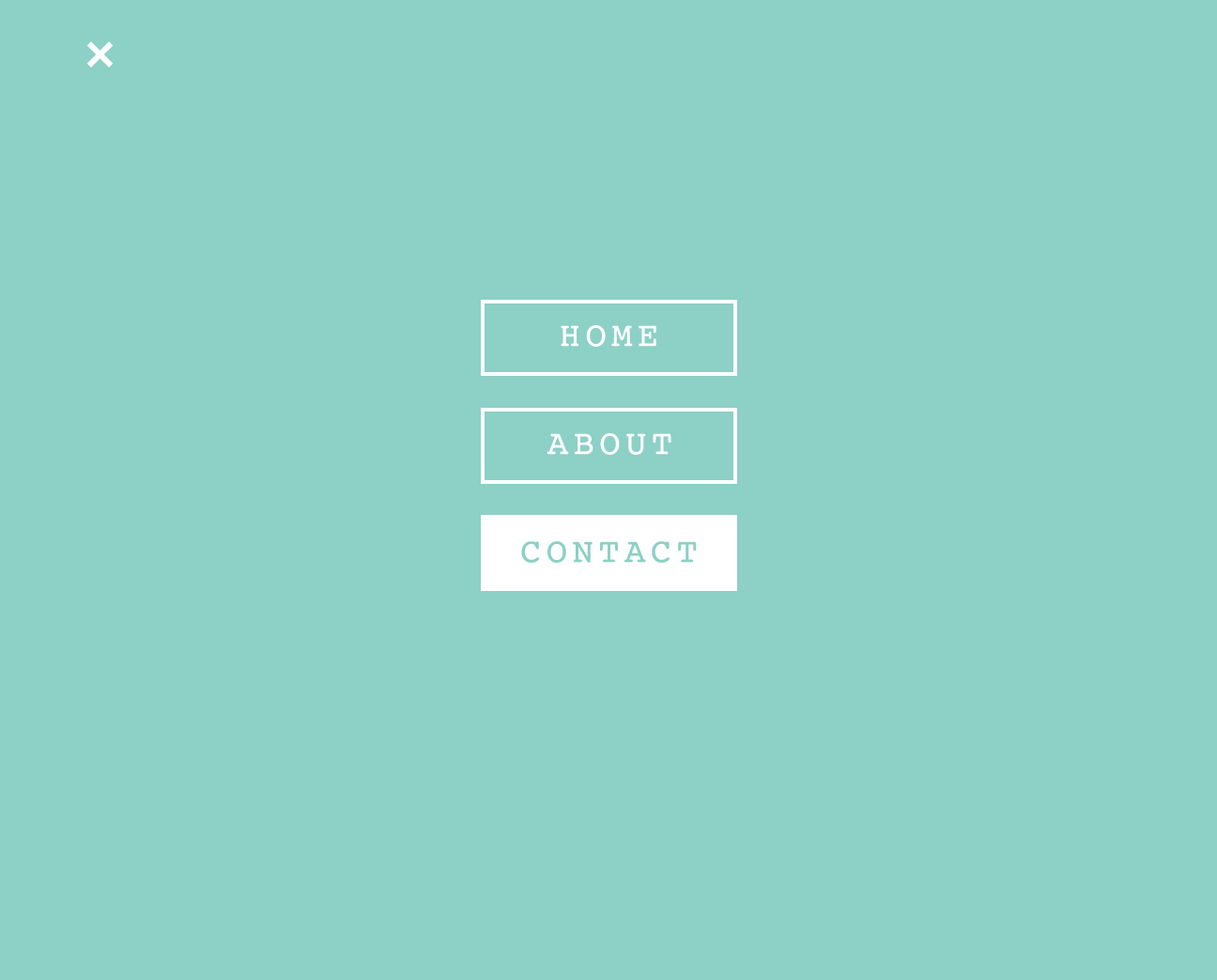
<style>
.page{position:relative;width:1217px;height:980px;background:#8cd0c6}
.page>*{position:absolute;margin:0}
.t1{font:34.8px "Courier";letter-spacing:0.15em;color:#ffffff}
.t2{font:34.8px "Courier";letter-spacing:0.15em;color:#8cd0c6}
</style>
<div class="page">
<p class="t1" style="left:561px;top:325px;width:96px;height:22px">HOME</p>
<p class="t1" style="left:547px;top:433px;width:125px;height:22px">ABOUT</p>
<p class="t2" style="left:521px;top:541px;width:176px;height:22px">CONTACT</p>
</div>
